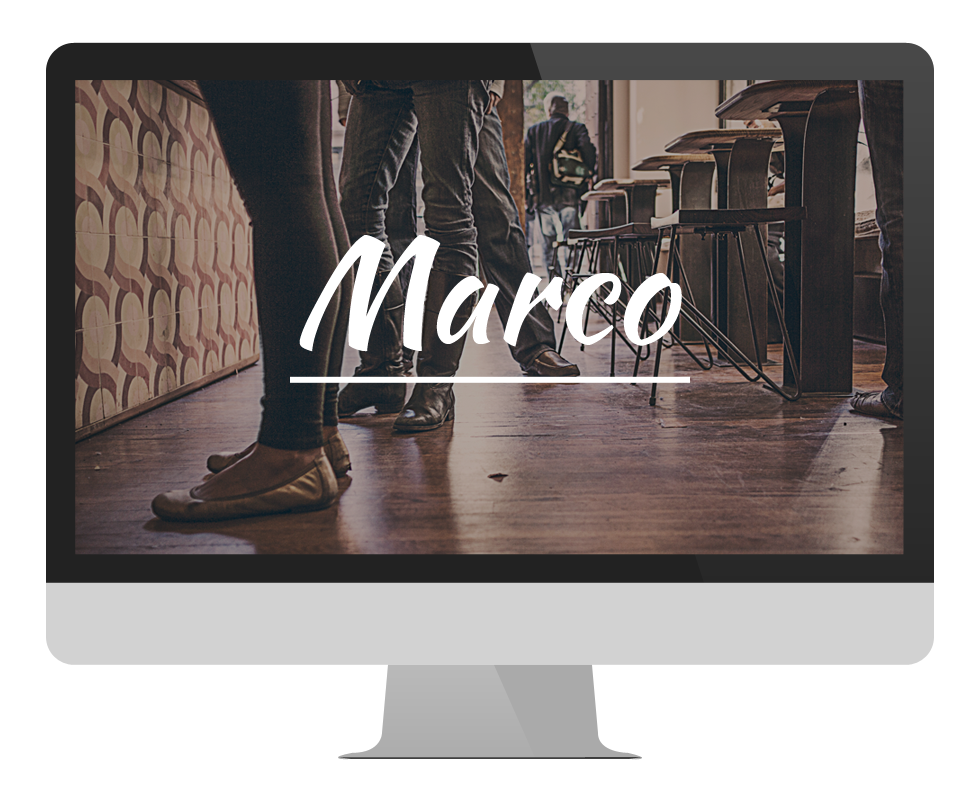
<style>
.page{position:relative;width:980px;height:800px;background:#ffffff}
.page>*{position:absolute;margin:0}
.t1{font:144px "KaushanScript-Regular";color:#ffffff}
</style>
<div class="page">
<p class="t1" style="left:299px;top:235px;width:383px;height:117px">Marco</p>
</div>
